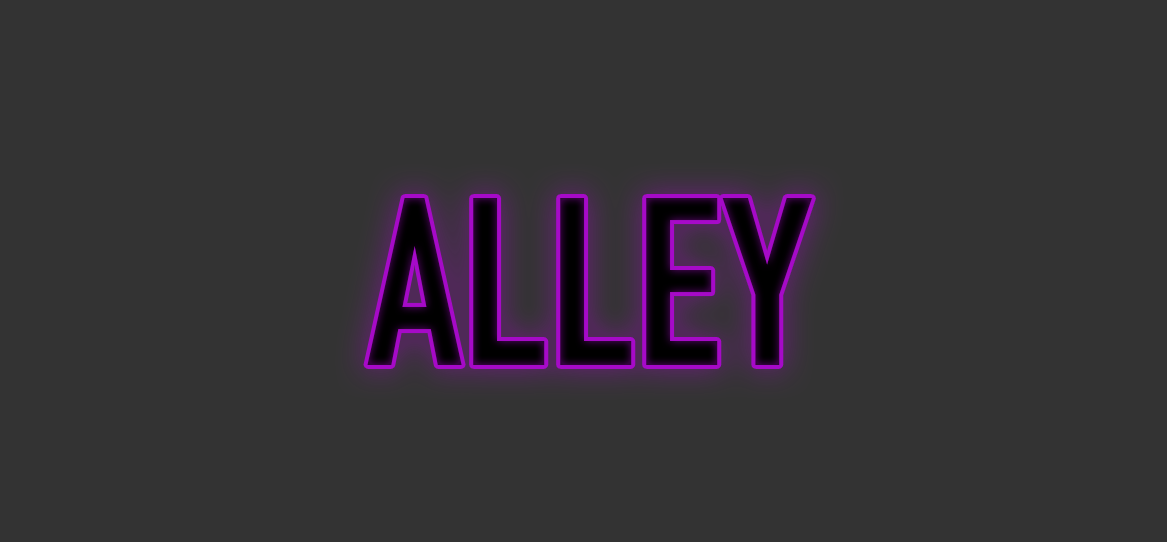
<style>
.page{position:relative;width:1167px;height:542px;background:#333333}
.page>*{position:absolute;margin:0}
.t1{font:233.7px "DINEngschrift";color:#080009}
</style>
<div class="page">
<p class="t1" style="left:367px;top:198px;width:445px;height:167px">ALLEY</p>
</div>
